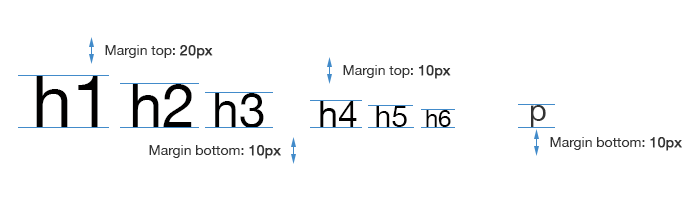
<style>
.page{position:relative;width:700px;height:200px;background:#ffffff}
.page>*{position:absolute;margin:0}
.t1{font:14px "HelveticaNeue";color:#333333}
.t2{font:14px "HelveticaNeue";color:#333333;font-weight:bold}
.t3{font:72px "HelveticaNeue";color:#010000}
.t4{font:60px "HelveticaNeue";color:#010000}
.t5{font:48px "HelveticaNeue";color:#010000}
.t6{font:36px "HelveticaNeue";color:#010000}
.t7{font:30px "HelveticaNeue";color:#010000}
.t8{font:24px "HelveticaNeue";color:#010000}
.t9{font:30px "HelveticaNeue";color:#333333}
</style>
<div class="page">
<p class="t1" style="left:105px;top:45px;width:108px;height:14px">Margin top: <span class="t2">20px</span></p>
<p class="t1" style="left:343px;top:65px;width:108px;height:14px">Margin top: <span class="t2">10px</span></p>
<p class="t3" style="left:36px;top:76px;width:228px;height:52px">h1<span class="t4"> h2 </span><span class="t5">h3</span></p>
<p class="t6" style="left:320px;top:101px;width:131px;height:26px">h4 <span class="t7">h5 </span><span class="t8">h6</span></p>
<p class="t9" style="left:531px;top:105px;width:15px;height:22px">p</p>
<p class="t1" style="left:550px;top:137px;width:132px;height:14px">Margin bottom: <span class="t2">10px</span></p>
<p class="t1" style="left:149px;top:145px;width:132px;height:14px">Margin bottom: <span class="t2">10px</span></p>
</div>
